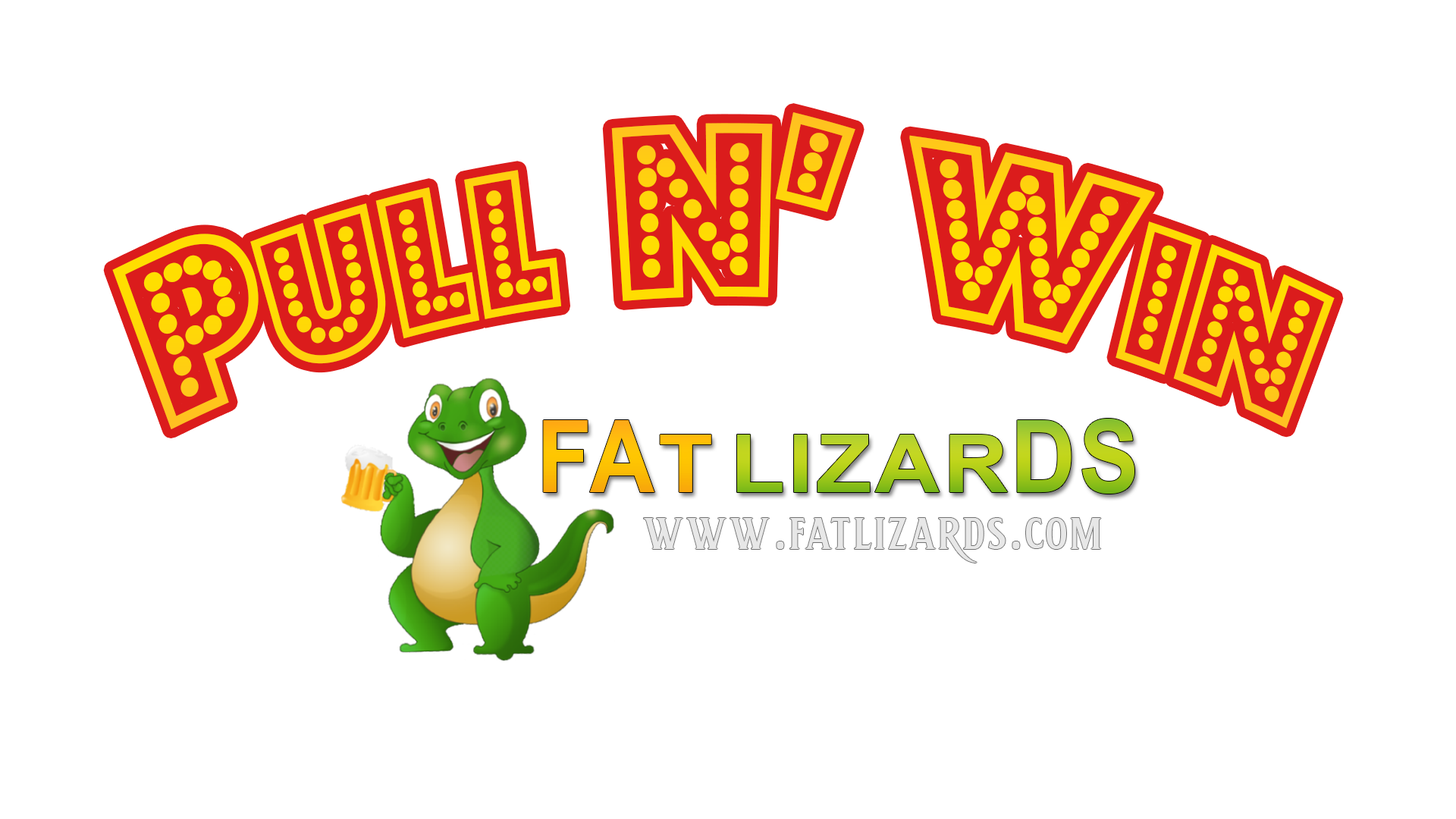
<style>
.page{position:relative;width:1456px;height:819px;background:#ffffff}
.page>*{position:absolute;margin:0}
.t1{font:243.8px "BudmoJigglish-Regular";color:#ffda05;scale:0.86 1}
.t2{font:199.5px "BudmoJigglish-Regular";color:#ffda05;scale:0.86 1}
.t3{font:100.1px "Arial-BoldMT";letter-spacing:0.04em;color:#ffbc06;scale:0.89 1}
.t4{font:80.1px "Arial-BoldMT";letter-spacing:0.04em;color:#ffbc06;scale:1.12 1}
.t5{font:80.1px "Arial-BoldMT";letter-spacing:0.04em;scale:1.12 1}
.t6{font:100.1px "Arial-BoldMT";letter-spacing:0.04em;scale:0.89 1}
</style>
<div class="page">
<p class="t1" style="left:112px;top:112px;width:1223px;height:318px">P<span class="t2">ULL </span>n’ W<span class="t2">IN</span></p>
<p class="t3" style="left:543px;top:420px;width:168px;height:72px">FA<span class="t4">T</span></p>
<p class="t5" style="left:737px;top:419px;width:397px;height:75px"><span class="t6">       </span>LIZAR<span class="t6">DS</span></p>
</div>
